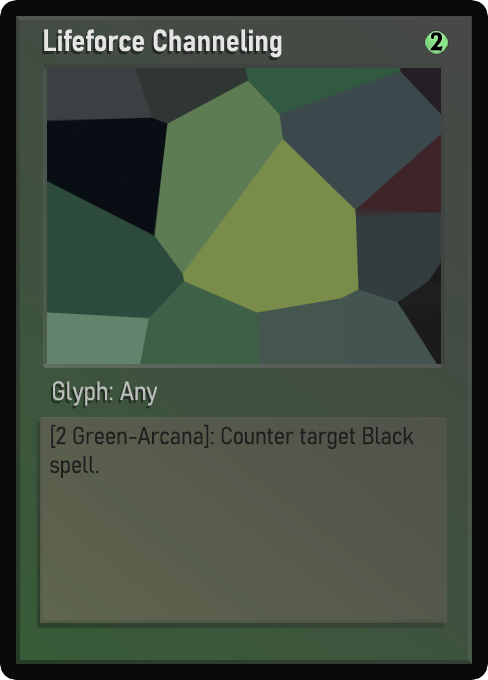
<style>
.page{position:relative;width:488px;height:680px}
.page>*{position:absolute;margin:0}
.t1{font:30px "Bahnschrift-SemiBoldSemiCondensed";color:#f2f2f2;font-weight:bold}
.t2{font:25px "WTRRoycroft";color:#000000;font-weight:bold;scale:1.09 1}
.t3{font:26px "Bahnschrift-LightSemiCondensed";color:#c8c8c8;font-weight:bold}
.t4{font:24px "Bahnschrift-LightSemiCondensed";color:#1e1e1e;font-weight:bold}
</style>
<div class="page">
<p class="t1" style="left:44px;top:29px;width:238px;height:29px;opacity:0.9">Lifeforce Channeling</p>
<p class="t2" style="left:430px;top:32px;width:13px;height:19px">2</p>
<p class="t3" style="left:53px;top:381px;width:105px;height:25px;opacity:0.9">Glyph: Any</p>
<p class="t4" style="left:50px;top:424px;width:364px;height:54px">[2 Green-Arcana]: Counter target Black spell.</p>
</div>
